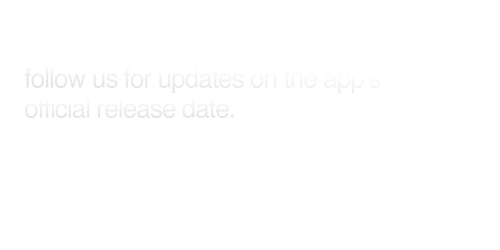
<style>
.page{position:relative;width:500px;height:250px;background:#ffffff}
.page>*{position:absolute;margin:0}
.t1{font:26px "Helvetica";letter-spacing:-0.035em;color:#f2f1f1}
.t2{font:26px "Helvetica";letter-spacing:-0.035em;color:#eeeded}
</style>
<div class="page">
<p class="t1" style="left:24px;top:68px;width:357px;height:25px">follow us for updates on the app’s</p>
<p class="t2" style="left:25px;top:98px;width:209px;height:20px">official release date.</p>
</div>
